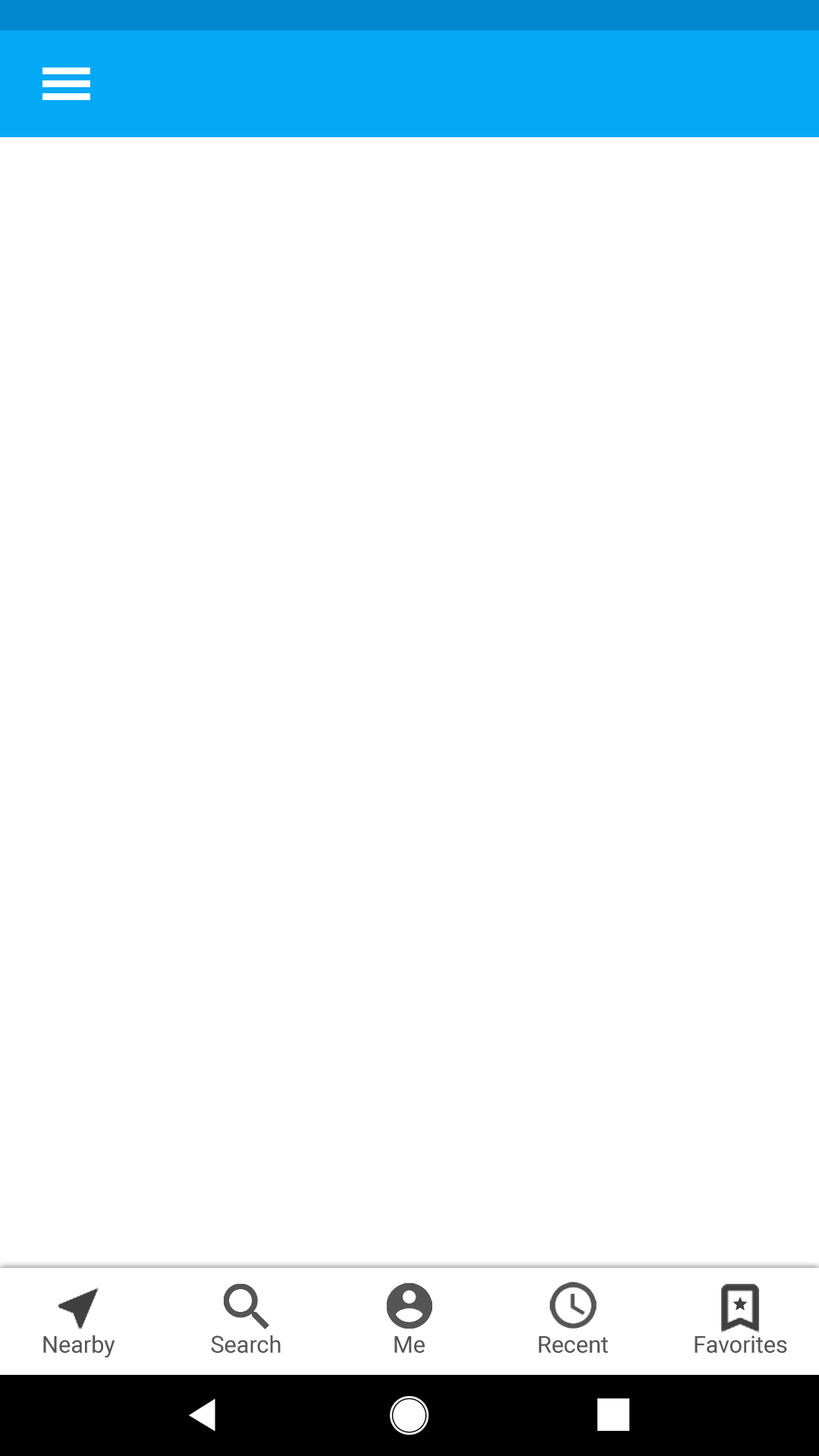
<style>
.page{position:relative;width:819px;height:1456px;background:#ffffff}
.page>*{position:absolute;margin:0}
.t1{font:23.2px "Roboto-Regular";color:#555555}
</style>
<div class="page">
<p class="t1" style="left:43px;top:1335px;width:72px;height:23px">Nearby</p>
<p class="t1" style="left:211px;top:1335px;width:70px;height:18px">Search</p>
<p class="t1" style="left:394px;top:1336px;width:31px;height:17px">Me</p>
<p class="t1" style="left:538px;top:1336px;width:70px;height:17px">Recent</p>
<p class="t1" style="left:695px;top:1335px;width:92px;height:18px">Favorites</p>
</div>
